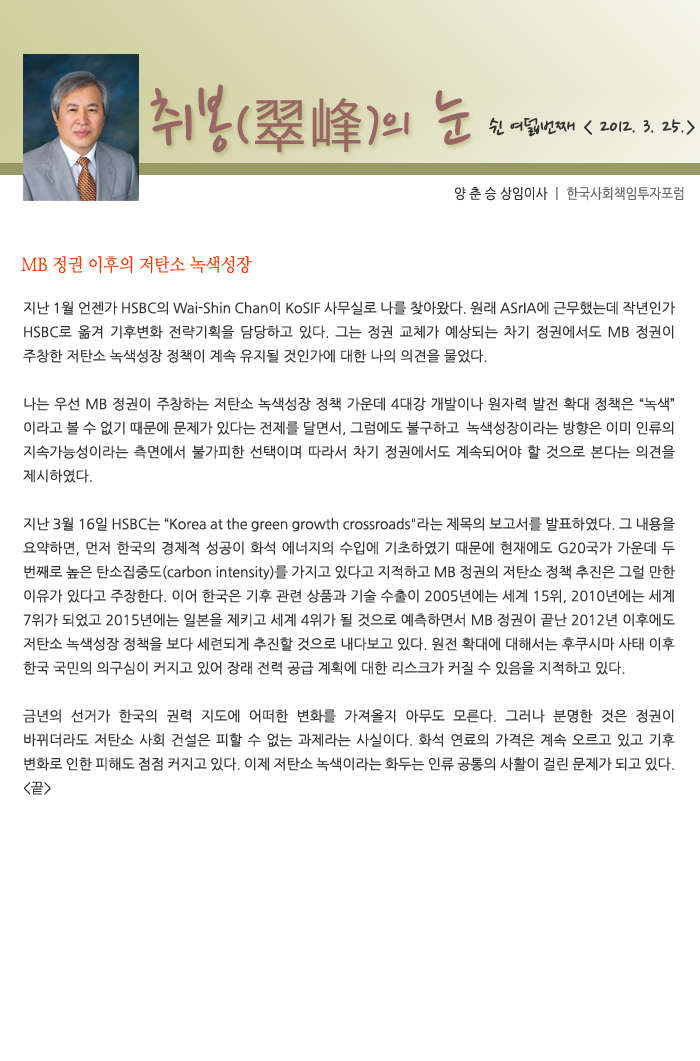
<style>
.page{position:relative;width:700px;height:1061px;background:#ffffff}
.page>*{position:absolute;margin:0}
.t1{font:77.5px "NanumPen";color:#996666}
.t2{font:60px "NanumPen";color:#996666}
.t3{font:60px "NanumGothic";color:#996666}
.t4{font:24px "NanumPen";color:#333333}
.t5{font:14px "NanumGothic";color:#666666;scale:0.9 1}
.t6{font:14px "NanumGothic";color:#333333;scale:0.9 1}
.t7{font:18px "NanumMyeongjo";color:#ff3300;scale:0.9 1}
.t8{font:14px/24px "NanumGothic";color:#333333}
</style>
<div class="page">
<p class="t1" style="left:150px;top:84px;width:321px;height:69px">취봉<span class="t2">(</span><span class="t3">翠峰</span><span class="t2">)</span><span class="t2">의</span> 눈</p>
<p class="t4" style="left:489px;top:117px;width:206px;height:20px">쉰 여덟번째 &lt; 2012. 3. 25.&gt;</p>
<p class="t5" style="left:455px;top:187px;width:229px;height:14px"><span class="t6">양 춘 승 상임이사 </span>ㅣ 한국사회책임투자포럼</p>
<p class="t7" style="left:21px;top:256px;width:231px;height:18px">MB 정권 이후의 저탄소 녹색성장</p>
<p class="t8" style="left:23px;top:301px;width:652px;height:494px;text-align:justify">지난 1월 언젠가 HSBC의 Wai-Shin Chan이 KoSIF 사무실로 나를 찾아왔다. 원래 ASrIA에 근무했는데 작년인가 HSBC로 옮겨 기후변화 전략기획을 담당하고 있다. 그는 정권 교체가 예상되는 차기 정권에서도 MB 정권이 주창한 저탄소 녹색성장 정책이 계속 유지될 것인가에 대한 나의 의견을 물었다.<br><br>나는 우선 MB 정권이 주창하는 저탄소 녹색성장 정책 가운데 4대강 개발이나 원자력 발전 확대 정책은 “녹색”이라고 볼 수 없기 때문에 문제가 있다는 전제를 달면서, 그럼에도 불구하고  녹색성장이라는 방향은 이미 인류의 지속가능성이라는 측면에서 불가피한 선택이며 따라서 차기 정권에서도 계속되어야 할 것으로 본다는 의견을 제시하였다.<br><br>지난 3월 16일 HSBC는 “Korea at the green growth crossroads"라는 제목의 보고서를 발표하였다. 그 내용을 요약하면, 먼저 한국의 경제적 성공이 화석 에너지의 수입에 기초하였기 때문에 현재에도 G20국가 가운데 두 번째로 높은 탄소집중도(carbon intensity)를 가지고 있다고 지적하고 MB 정권의 저탄소 정책 추진은 그럴 만한 이유가 있다고 주장한다. 이어 한국은 기후 관련 상품과 기술 수출이 2005년에는 세계 15위, 2010년에는 세계 7위가 되었고 2015년에는 일본을 제키고 세계 4위가 될 것으로 예측하면서 MB 정권이 끝난 2012년 이후에도 저탄소 녹색성장 정책을 보다 세련되게 추진할 것으로 내다보고 있다. 원전 확대에 대해서는 후쿠시마 사태 이후 한국 국민의 의구심이 커지고 있어 장래 전력 공급 계획에 대한 리스크가 커질 수 있음을 지적하고 있다.<br><br>금년의 선거가 한국의 권력 지도에 어떠한 변화를 가져올지 아무도 모른다. 그러나 분명한 것은 정권이 바뀌더라도 저탄소 사회 건설은 피할 수 없는 과제라는 사실이다. 화석 연료의 가격은 계속 오르고 있고 기후 변화로 인한 피해도 점점 커지고 있다. 이제 저탄소 녹색이라는 화두는 인류 공통의 사활이 걸린 문제가 되고 있다.&lt;끝&gt;</p>
</div>
